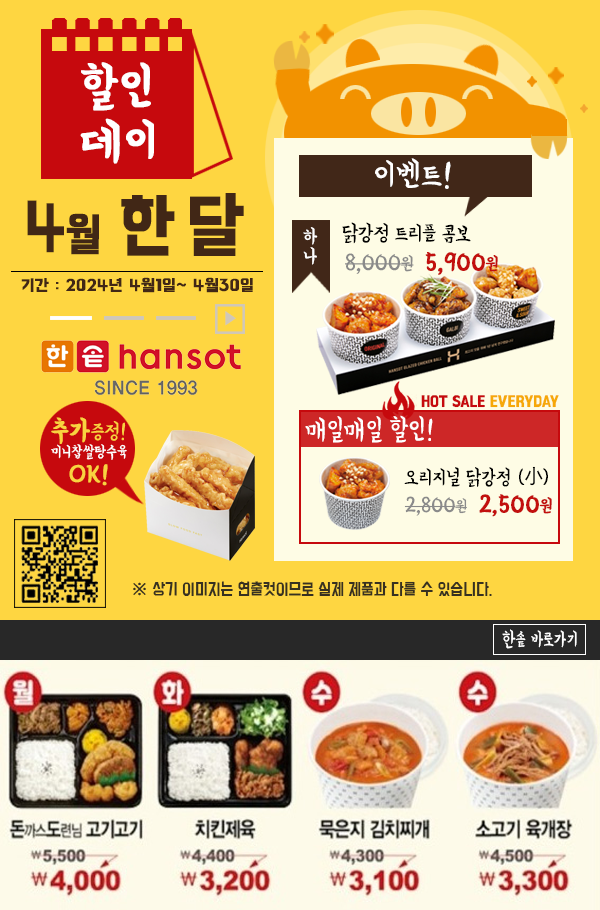
<style>
.page{position:relative;width:600px;height:910px;background:#fed641}
.page>*{position:absolute;margin:0}
.t1{font:49.3px "BMYEONSUNG";color:#ffffff;font-weight:bold;scale:1.03 1}
.t2{font:49.3px/53.8px "BMYEONSUNG";color:#ffffff;font-weight:bold;scale:1.03 1}
.t3{font:33.8px "BMYEONSUNG";color:#ffffff}
.t4{font:70.5px "BMHANNAPro";color:#412716;scale:0.91 1}
.t5{font:46.3px "BMHANNAPro";color:#412716;font-weight:bold;scale:0.91 1}
.t6{font:72.7px "BMHANNAPro";letter-spacing:0.16em;color:#412716;font-weight:bold;scale:0.91 1}
.t7{font:72.7px "BMHANNAPro";letter-spacing:0.14em;color:#412716;font-weight:bold;scale:0.91 1}
.t8{font:21.7px "BMYEONSUNG";letter-spacing:-0.025em;color:#000000;scale:1.04 1}
.t9{font:19.6px "BMYEONSUNG";letter-spacing:0.04em;color:#ffffff}
.t10{font:23.5px "BMYEONSUNG";color:#8a8a8a}
.t11{font:18.4px "BMYEONSUNG";color:#8a8a8a}
.t12{font:25.2px "BMYEONSUNG";color:#c2100e;font-weight:bold}
.t13{font:18.4px "BMYEONSUNG";color:#c2100e;font-weight:bold}
.t14{font:16.5px "BMHANNAPro";color:#412716;font-weight:bold;scale:1.04 1}
.t15{font:15.5px "NanumBarunGothic";color:#cfc7ba;scale:0.84 1}
.t16{font:16px "BMHANNAPro";color:#c6090d;font-weight:bold;scale:0.8 1}
.t17{font:16px "BMHANNAPro";color:#f6a808;font-weight:bold;scale:0.8 1}
.t18{font:15.8px "BMYEONSUNG";color:#ffffff}
.t19{font:27.6px "BMYEONSUNG";color:#f9d340;font-weight:bold}
.t20{font:21.7px "BMYEONSUNG";color:#f9d340}
.t21{font:25.6px/25.6px "BMYEONSUNG";color:#f9d340;font-weight:bold}
.t22{font:27.8px "BMYEONSUNG";color:#ffffff;scale:0.93 1}
.t23{font:20.9px "BMYEONSUNG";color:#000000}
.t24{font:20.9px "NanumBarunGothic";color:#000000}
.t25{font:21.7px "BMYEONSUNG";color:#8a8a8a}
.t26{font:16.7px "BMYEONSUNG";color:#8a8a8a}
.t27{font:25px "BMYEONSUNG";color:#c2100e;font-weight:bold}
.t28{font:23.3px "BMYEONSUNG";color:#c2100e;font-weight:bold}
.t29{font:18.3px "BMYEONSUNG";color:#c2100e;font-weight:bold}
.t30{font:14.4px "BMDoHyeon";color:#373121;scale:0.92 1}
.t31{font:16px "NanumBarunGothic";color:#373121;font-weight:bold}
.t32{font:19.1px "BMYEONSUNG";color:#ffffff;scale:0.89 1}
</style>
<div class="page">
<p class="t1" style="left:80px;top:62px;width:74px;height:102px">할인<br><span class="t2">데이</span></p>
<p class="t3" style="left:375px;top:158px;width:76px;height:31px">이벤트!</p>
<p class="t4" style="left:27px;top:193px;width:217px;height:63px">4<span class="t5">월 </span><span class="t6">한</span><span class="t7">달</span></p>
<p class="t8" style="left:342px;top:222px;width:129px;height:22px">닭강정 트리플 콤보</p>
<p class="t9" style="left:303px;top:227px;width:15px;height:38px">하나</p>
<p class="t10" style="left:345px;top:252px;width:153px;height:23px">8,000<span class="t11">원  </span><span class="t12">5,900</span><span class="t13">원</span></p>
<p class="t14" style="left:21px;top:277px;width:232px;height:16px">기간 : 2024년 4월1일~ 4월30일</p>
<p class="t15" style="left:225px;top:311px;width:11px;height:15px">▶</p>
<p class="t16" style="left:421px;top:395px;width:138px;height:13px">HOT SALE <span class="t17">EVERYDAY</span></p>
<p class="t18" style="left:51px;top:417px;width:76px;height:69px;text-align:center"><span class="t19">추가</span><span class="t20">증정!<br></span>미니찹쌀탕수육<br><span class="t21">OK!</span></p>
<p class="t22" style="left:305px;top:415px;width:128px;height:28px">매일매일 할인!</p>
<p class="t23" style="left:404px;top:466px;width:144px;height:21px">오리지널 닭강정 (<span class="t24">小</span>)</p>
<p class="t25" style="left:404px;top:494px;width:148px;height:23px">2,800<span class="t26">원  </span><span class="t27">2</span><span class="t28">,</span><span class="t27">500</span><span class="t29">원</span></p>
<p class="t30" style="left:133px;top:581px;width:359px;height:15px"><span class="t31">※ </span>상기 이미지는 연출컷이므로 실제 제품과 다를 수 있습니다.</p>
<p class="t32" style="left:502px;top:629px;width:75px;height:20px">한솥 바로가기</p>
</div>
